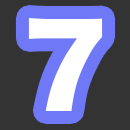
<style>
.page{position:relative;width:130px;height:130px;background:#333333}
.page>*{position:absolute;margin:0}
.t1{font:110.5px "HiraKakuStdN-W8";color:#ffffff}
</style>
<div class="page">
<p class="t1" style="left:28px;top:18px;width:75px;height:93px">７</p>
</div>
